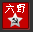
<style>
.page{position:relative;width:33px;height:32px;background:#c50000}
.page>*{position:absolute;margin:0}
.t1{font:10.4px "SimSun";color:#ffffff}
</style>
<div class="page">
<p class="t1" style="left:5px;top:4px;width:20px;height:9px">六野</p>
</div>
